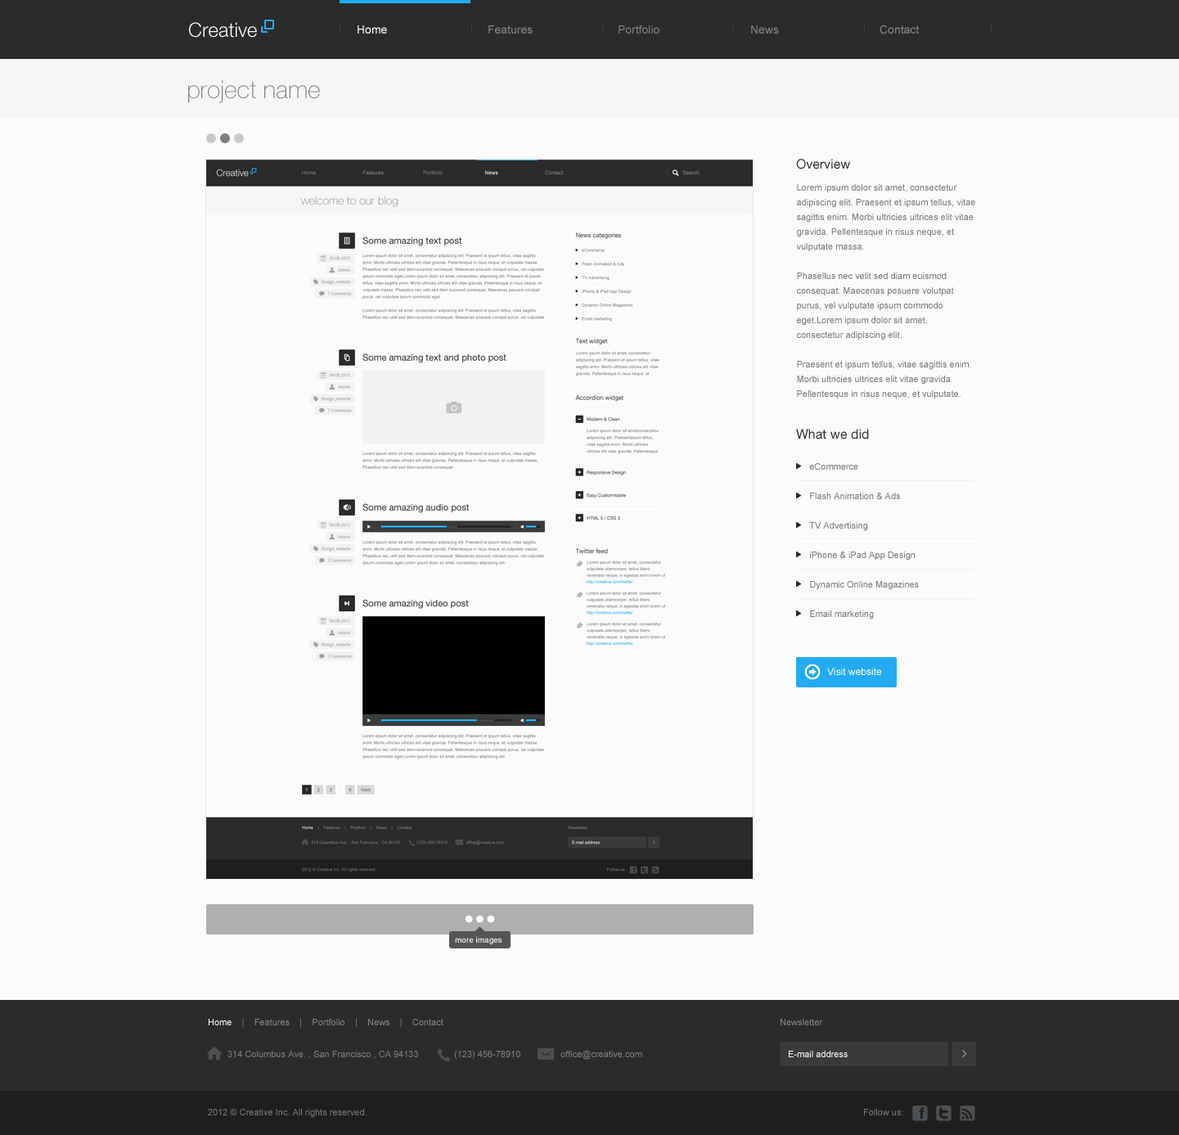
<style>
.page{position:relative;width:1179px;height:1135px;background:#fbfbfb}
.page>*{position:absolute;margin:0}
.t1{font:19.6px "HelveticaNeueLTStd-Lt";color:#ffffff}
.t2{font:8.5px "HelveticaNeueLTStd-Lt";scale:1.35 1}
.t3{font:11.5px "ArialMT";color:#ffffff}
.t4{font:11.5px "ArialMT";color:#80878c}
.t5{font:11.5px "ArialMT";color:#7a8186}
.t6{font:24.5px "HelveticaNeueLTStd-Th";color:#7a8186}
.t7{font:13.1px "HelveticaNeueLTStd-Roman";color:#2b2b2b}
.t8{font:9px/14.7px "ArialMT";color:#757b7f}
.t9{font:9px/29.5px "ArialMT";color:#757b7f}
.t10{font:9.8px "ArialMT";color:#ffffff}
.t11{font:8.2px "ArialMT";color:#ffffff}
.t12{font:9px "ArialMT";color:#80878c}
.t13{font:9px "ArialMT";color:#ffffff}
.t14{font:9px "ArialMT";color:#7a8186}
.t15{font:9px "ArialMT";color:#797979}
</style>
<div class="page">
<p class="t1" style="left:189px;top:22px;width:68px;height:16px">Creative</p>
<p class="t2" style="left:340px;top:25px;width:0px;height:9px">|</p>
<p class="t3" style="left:358px;top:25px;width:29px;height:9px">Home</p>
<p class="t2" style="left:471px;top:25px;width:1px;height:9px">|</p>
<p class="t4" style="left:488px;top:25px;width:45px;height:9px">Features</p>
<p class="t2" style="left:602px;top:25px;width:1px;height:9px">|</p>
<p class="t5" style="left:619px;top:25px;width:40px;height:9px">Portfolio</p>
<p class="t2" style="left:732px;top:25px;width:1px;height:9px">|</p>
<p class="t4" style="left:751px;top:25px;width:28px;height:9px">News</p>
<p class="t2" style="left:864px;top:25px;width:1px;height:9px">|</p>
<p class="t4" style="left:880px;top:25px;width:40px;height:9px">Contact</p>
<p class="t2" style="left:991px;top:25px;width:1px;height:9px">|</p>
<p class="t6" style="left:188px;top:80px;width:132px;height:23px">project name</p>
<p class="t7" style="left:796px;top:159px;width:54px;height:10px">Overview</p>
<p class="t8" style="left:796px;top:184px;width:179px;height:215px">Lorem ipsum dolor sit amet, consectetur adipiscing elit. Praesent et ipsum tellus, vitae sagittis enim. Morbi ultricies ultrices elit vitae gravida. Pellentesque in risus neque, et vulputate massa. <br><br>Phasellus nec velit sed diam euismod consequat. Maecenas posuere volutpat purus, vel vulputate ipsum commodo eget.Lorem ipsum dolor sit amet, consectetur adipiscing elit. <br><br>Praesent et ipsum tellus, vitae sagittis enim. Morbi ultricies ultrices elit vitae gravida. Pellentesque in risus neque, et vulputate. massa. Phasellus nec velit sed diam euismod consequat. Maecenas posuere volutpat purus, vel vulputate ipsum commodo eget.<br><br>Lorem ipsum dolor sit amet, consectetur adipiscing elit. Praesent et ipsum tellus, vitae sagittis Phasellus nec velit sed diam euismod consequat. Maecenas posuere volutpat purus, vel vulputate ipsum commodo eget.</p>
<p class="t7" style="left:796px;top:429px;width:73px;height:10px">What we did</p>
<p class="t9" style="left:809px;top:463px;width:110px;height:156px">eCommerce<br>    Flash Animation &amp; Ads<br>    TV Advertising<br>    iPhone &amp; iPad App Design<br>    Dynamic Online Magazines<br>    Email marketing</p>
<p class="t10" style="left:827px;top:668px;width:55px;height:7px">Visit website</p>
<p class="t11" style="left:455px;top:936px;width:47px;height:8px">more images</p>
<p class="t12" style="left:209px;top:1019px;width:234px;height:9px"><span class="t13">Home   </span> |    Features    |    Portfolio    |    News    |    Contact</p>
<p class="t12" style="left:781px;top:1019px;width:42px;height:6px">Newsletter</p>
<p class="t14" style="left:227px;top:1051px;width:191px;height:8px">314 Columbus Ave. , San Francisco , CA 94133</p>
<p class="t14" style="left:454px;top:1051px;width:66px;height:9px">(123) 456-78910</p>
<p class="t14" style="left:560px;top:1051px;width:82px;height:9px">office@creative.com</p>
<p class="t13" style="left:789px;top:1051px;width:59px;height:6px">E-mail address</p>
<p class="t15" style="left:208px;top:1109px;width:159px;height:9px">2012 © Creative Inc. All rights reserved.</p>
<p class="t15" style="left:864px;top:1109px;width:39px;height:6px">Follow us:</p>
</div>
